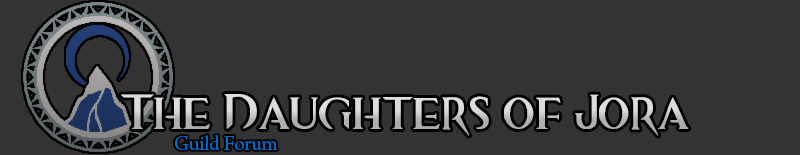
<style>
.page{position:relative;width:800px;height:155px;background:#333333}
.page>*{position:absolute;margin:0}
.t1{font:50px "GWTwoFontVersion1.1"}
.t2{font:22px "ArnoPro-Regular";letter-spacing:-0.02em;color:#006dcf}
</style>
<div class="page">
<p class="t1" style="left:121px;top:94px;width:568px;height:42px">The Daughters of Jora</p>
<p class="t2" style="left:175px;top:135px;width:103px;height:15px">Guild Forum</p>
</div>
